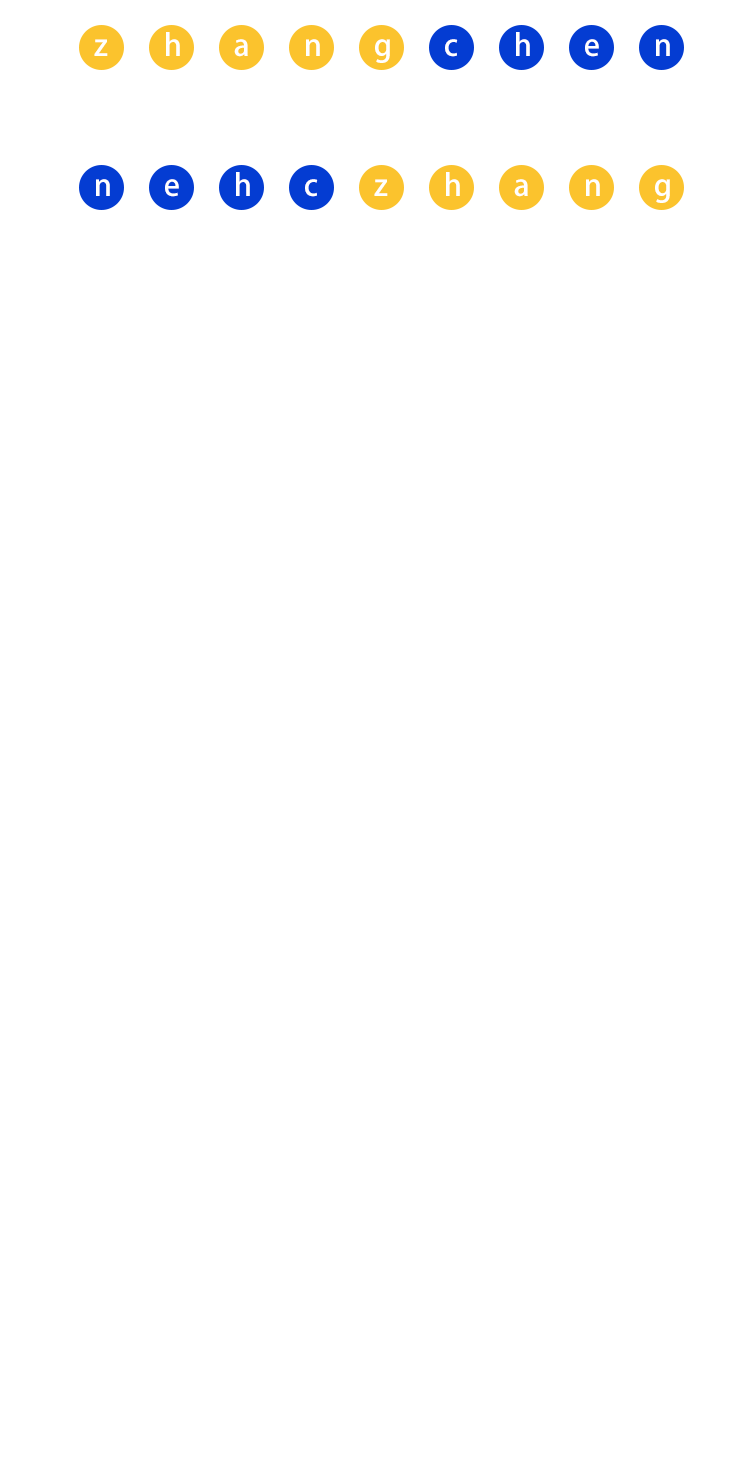
<style>
.page{position:relative;width:750px;height:1467px;background:#ffffff}
.page>*{position:absolute;margin:0}
.t1{font:30px "AdobeHeitiStd-Regular";color:#ffffff}
</style>
<div class="page">
<p class="t1" style="left:94px;top:39px;width:14px;height:17px">z</p>
<p class="t1" style="left:166px;top:32px;width:14px;height:24px">h</p>
<p class="t1" style="left:234px;top:39px;width:14px;height:18px">a</p>
<p class="t1" style="left:306px;top:39px;width:14px;height:17px">n</p>
<p class="t1" style="left:375px;top:39px;width:15px;height:24px">g</p>
<p class="t1" style="left:445px;top:39px;width:13px;height:18px">c</p>
<p class="t1" style="left:516px;top:32px;width:14px;height:24px">h</p>
<p class="t1" style="left:585px;top:39px;width:14px;height:18px">e</p>
<p class="t1" style="left:656px;top:39px;width:14px;height:17px">n</p>
<p class="t1" style="left:236px;top:172px;width:14px;height:24px">h</p>
<p class="t1" style="left:446px;top:172px;width:14px;height:24px">h</p>
<p class="t1" style="left:96px;top:179px;width:14px;height:17px">n</p>
<p class="t1" style="left:165px;top:179px;width:14px;height:18px">e</p>
<p class="t1" style="left:305px;top:179px;width:13px;height:18px">c</p>
<p class="t1" style="left:374px;top:179px;width:14px;height:17px">z</p>
<p class="t1" style="left:514px;top:179px;width:14px;height:18px">a</p>
<p class="t1" style="left:586px;top:179px;width:14px;height:17px">n</p>
<p class="t1" style="left:655px;top:179px;width:15px;height:24px">g</p>
</div>
